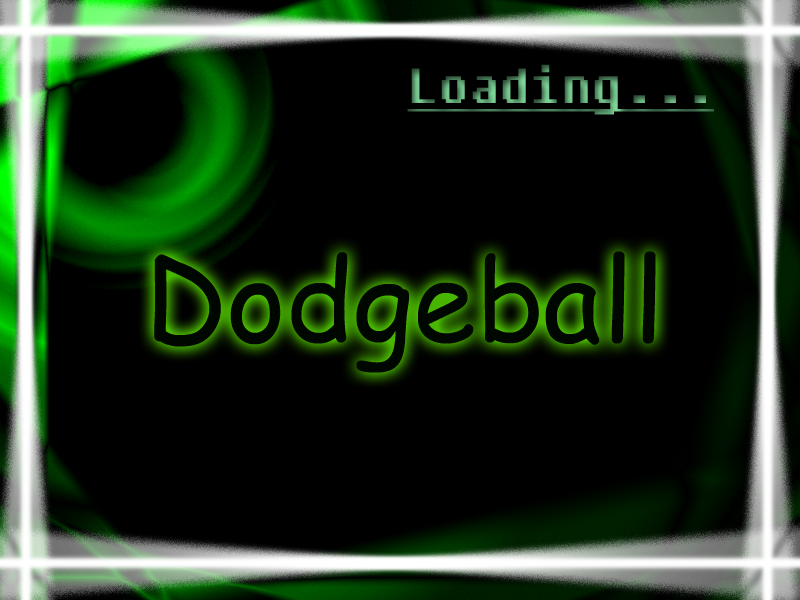
<style>
.page{position:relative;width:800px;height:600px;background:#000000}
.page>*{position:absolute;margin:0}
.t1{font:49px "Fixedsys";text-decoration:underline}
.t2{font:114px "ComicSansMS";color:#000600}
</style>
<div class="page">
<p class="t1" style="left:407px;top:64px;width:307px;height:51px">Loading...</p>
<p class="t2" style="left:154px;top:251px;width:502px;height:122px">Dodgeball</p>
</div>
